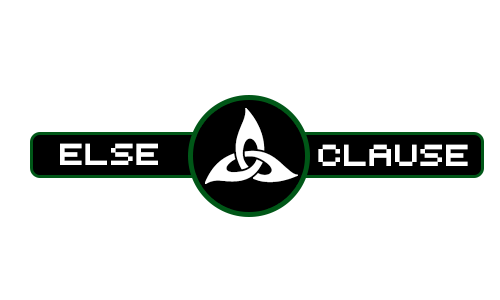
<style>
.page{position:relative;width:500px;height:300px;background:#ffffff}
.page>*{position:absolute;margin:0}
.t1{font:29.2px "Petyka-RetroComputer___SHORT";letter-spacing:0.03em;color:#ffffff}
</style>
<div class="page">
<p class="t1" style="left:60px;top:143px;width:98px;height:22px">Else</p>
<p class="t1" style="left:318px;top:144px;width:150px;height:22px">CLAUSE</p>
</div>
